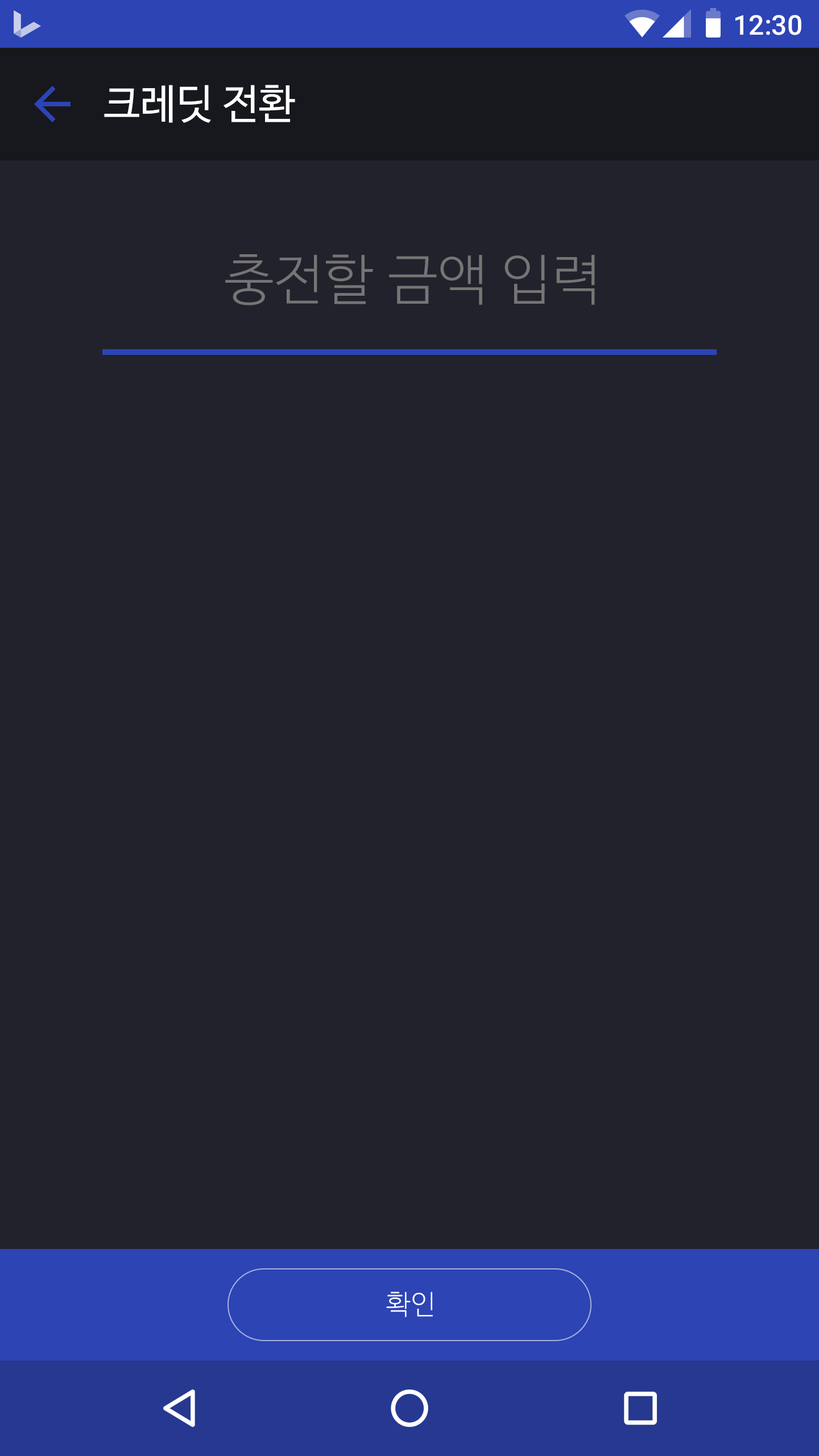
<style>
.page{position:relative;width:819px;height:1456px;background:#21222c}
.page>*{position:absolute;margin:0}
.t1{font:27.3px "Roboto-Medium";color:#ffffff}
.t2{font:40.9px "NanumBarunGothic";color:#ffffff}
.t3{font:54.6px "NanumBarunGothicLight";letter-spacing:0.025em;color:#757575}
.t4{font:27.3px "NanumBarunGothicLight";letter-spacing:0.025em;color:#ffffff}
</style>
<div class="page">
<p class="t1" style="left:735px;top:15px;width:66px;height:20px">12:30</p>
<p class="t2" style="left:104px;top:85px;width:191px;height:38px">크레딧 전환</p>
<p class="t3" style="left:225px;top:254px;width:370px;height:51px">충전할 금액 입력</p>
<p class="t4" style="left:386px;top:1292px;width:47px;height:25px">확인</p>
</div>
